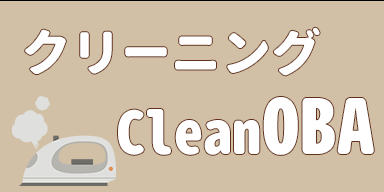
<style>
.page{position:relative;width:384px;height:192px;background:#d1c0a5}
.page>*{position:absolute;margin:0}
.t1{font:50px "GenJyuuGothic-Monospace-Heavy";color:#fffeff}
.t2{font:58.3px "GenJyuuGothic-Monospace-Heavy";color:#ffffff}
.t3{font:75px "GenJyuuGothic-Monospace-Heavy";color:#ffffff}
</style>
<div class="page">
<p class="t1" style="left:25px;top:27px;width:295px;height:49px">クリーニング</p>
<p class="t2" style="left:118px;top:97px;width:256px;height:58px">Clean<span class="t3">OBA</span></p>
</div>
